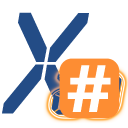
<style>
.page{position:relative;width:128px;height:128px;background:#ffffff}
.page>*{position:absolute;margin:0}
.t1{font:139.5px "QuiverItal";color:#234c86;scale:1.25 1}
.t2{font:71.7px "MyriadPro-Bold";color:#ffffff;scale:1.25 1}
</style>
<div class="page">
<p class="t1" style="left:2px;top:12px;width:87px;height:102px">X</p>
<p class="t2" style="left:67px;top:65px;width:44px;height:47px">#</p>
</div>
